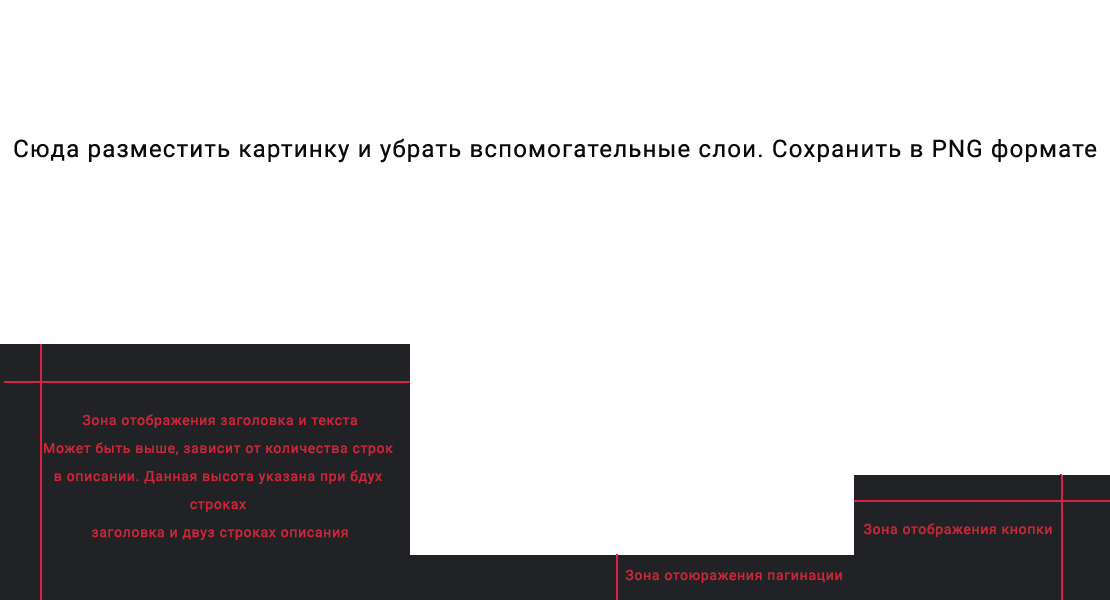
<style>
.page{position:relative;width:1110px;height:600px;background:#ffffff}
.page>*{position:absolute;margin:0}
.t1{font:24px "Roboto-Regular";letter-spacing:0.05em;color:#0a0a0b}
.t2{font:14px/28px "Roboto-Regular";letter-spacing:0.05em;color:#d0263a}
.t3{font:14px "Roboto-Regular";letter-spacing:0.05em;color:#d0263a}
</style>
<div class="page">
<p class="t1" style="left:14px;top:138px;width:1083px;height:25px">Сюда разместить картинку и убрать вспомогательные слои. Сохранить в PNG формате</p>
<p class="t2" style="left:44px;top:414px;width:349px;height:126px;text-align:center">Зона отображения заголовка и текста<br>Может быть выше, зависит от количества строк <br>в описании. Данная высота указана при бдух <br>строках <br>заголовка и двуз строках описания</p>
<p class="t3" style="left:864px;top:523px;width:188px;height:14px">Зона отображения кнопки</p>
<p class="t3" style="left:625px;top:569px;width:217px;height:14px">Зона отоюражения пагинации</p>
</div>
